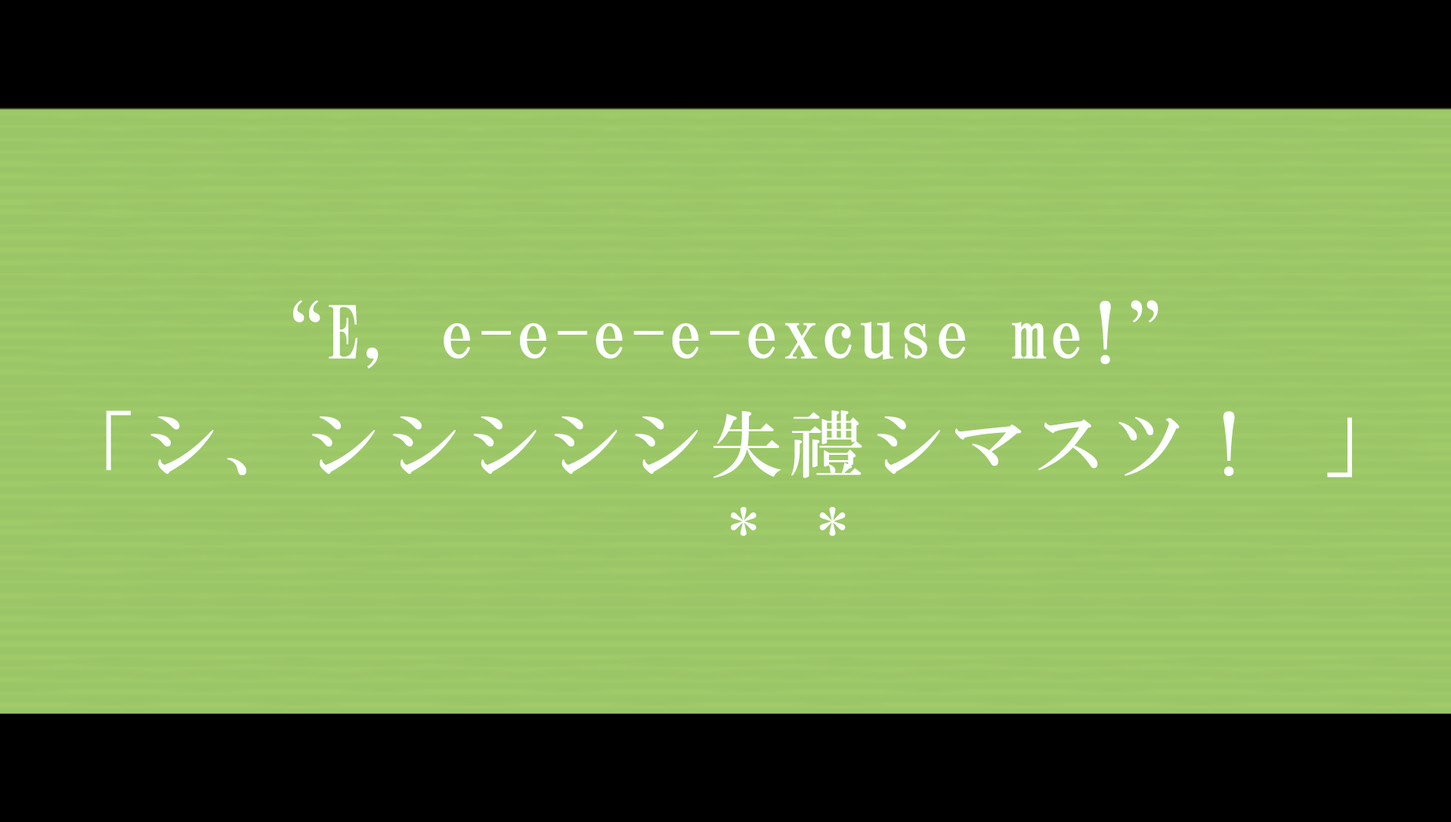
<style>
.page{position:relative;width:1451px;height:822px;background:#9bc667}
.page>*{position:absolute;margin:0}
.t1{font:72.5px "HGMinchoB";letter-spacing:0.025em;color:#fcfffc}
.t2{font:74px "HGMinchoB";letter-spacing:0.09em;color:#fcfffc}
.t3{font:74px "HGMinchoB";letter-spacing:0.33em;color:#fcfffc}
.t4{font:56.7px "HGMinchoB";letter-spacing:1.07em;color:#fcfffc}
.t5{font:56.7px "HGMinchoB";letter-spacing:0.41em;color:#fcfffc}
</style>
<div class="page">
<p class="t1" style="left:293px;top:300px;width:865px;height:69px">“E, e-e-e-e-excuse me!”</p>
<p class="t2" style="left:106px;top:410px;width:1246px;height:68px">「シ、シシシシシ失禮シマス<span class="t3">ツ</span>! 」</p>
<p class="t4" style="left:731px;top:507px;width:114px;height:29px">*<span class="t5">*</span></p>
</div>
